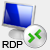
<style>
.page{position:relative;width:50px;height:50px;background:#efefef}
.page>*{position:absolute;margin:0}
.t1{font:10px "ArialMT";color:#000000}
</style>
<div class="page">
<p class="t1" style="left:2px;top:41px;width:21px;height:7px">RDP</p>
</div>
